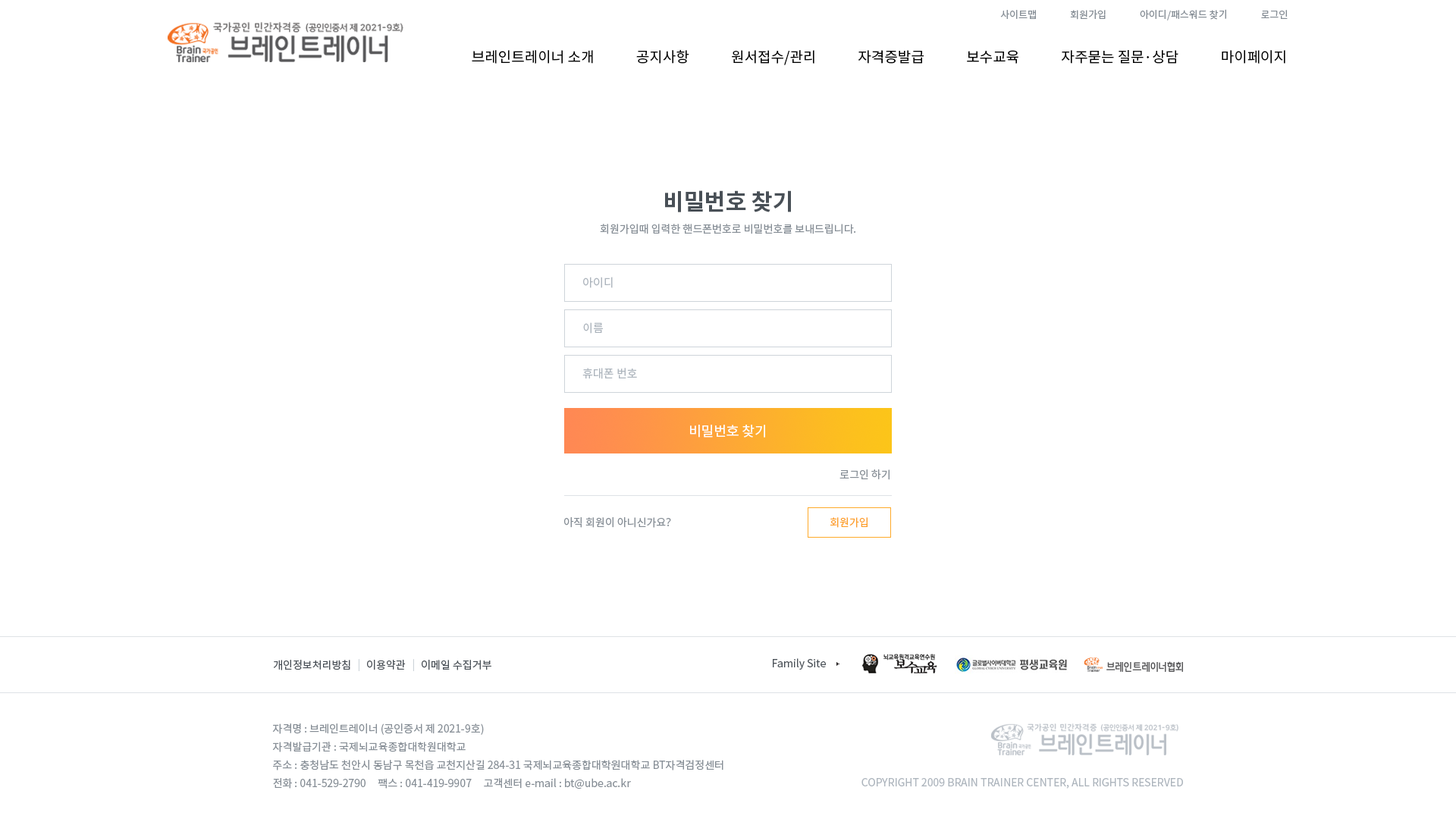
<style>
.page{position:relative;width:1456px;height:819px;background:#ffffff}
.page>*{position:absolute;margin:0}
.t1{font:9.9px "NotoSansCJKkr-Regular";letter-spacing:0.001em;color:#868e96}
.t2{font:14.4px "NotoSansCJKkr-Regular";color:#000000}
.t3{font:22.7px "NotoSansCJKkr-Bold";color:#495057}
.t4{font:10.6px "NotoSansCJKkr-Regular";color:#868e96;text-transform:uppercase}
.t5{font:11.4px "NotoSansCJKkr-Regular";color:#adb5bd}
.t6{font:13.6px "NotoSansCJKkr-Regular";color:#ffffff}
.t7{font:10.6px "NotoSansCJKkr-Regular";color:#868e96}
.t8{font:10.6px "NotoSansCJKkr-Regular";color:#fd9f27}
.t9{font:10.6px "NotoSansCJKkr-Regular";color:#495057}
.t10{font:10.6px "NotoSansCJKkr-Regular";color:#ced4da}
.t11{font:10.6px/18.2px "NotoSansCJKkr-Regular";color:#868e96}
.t12{font:10.6px "NotoSansCJKkr-Regular";color:#adb5bd}
</style>
<div class="page">
<p class="t1" style="left:1000px;top:9px;width:288px;height:11px">사이트맵               회원가입               아이디/패스워드 찾기               로그인</p>
<p class="t2" style="left:472px;top:49px;width:813px;height:16px">브레인트레이너 소개             공지사항             원서접수/관리             자격증발급             보수교육             자주묻는 질문·상담             마이페이지</p>
<p class="t3" style="left:665px;top:190px;width:126px;height:22px">비밀번호 찾기</p>
<p class="t4" style="left:600px;top:224px;width:256px;height:10px">회원가입때 입력한 핸드폰번호로 비밀번호를 보내드립니다.</p>
<p class="t5" style="left:583px;top:277px;width:30px;height:11px">아이디</p>
<p class="t5" style="left:583px;top:322px;width:20px;height:12px">이름</p>
<p class="t5" style="left:582px;top:368px;width:55px;height:11px">휴대폰 번호</p>
<p class="t6" style="left:690px;top:425px;width:75px;height:13px">비밀번호 찾기</p>
<p class="t7" style="left:839px;top:469px;width:51px;height:11px">로그인 하기</p>
<p class="t7" style="left:564px;top:517px;width:107px;height:11px">아직 회원이 아니신가요?</p>
<p class="t8" style="left:830px;top:517px;width:38px;height:11px">회원가입</p>
<p class="t9" style="left:273px;top:660px;width:77px;height:10px">개인정보처리방침</p>
<p class="t10" style="left:358px;top:659px;width:1px;height:12px">|</p>
<p class="t9" style="left:367px;top:660px;width:39px;height:10px">이용약관</p>
<p class="t10" style="left:413px;top:659px;width:1px;height:12px">|</p>
<p class="t9" style="left:422px;top:660px;width:69px;height:10px">이메일 수집거부</p>
<p class="t9" style="left:773px;top:658px;width:53px;height:12px">Family Site</p>
<p class="t11" style="left:272px;top:723px;width:451px;height:66px">자격명 : 브레인트레이너 (공인증서 제 2021-9호)<br>자격발급기관 : 국제뇌교육종합대학원대학교<br>주소 : 충청남도 천안시 동남구 목천읍 교천지산길 284-31 국제뇌교육종합대학원대학교 BT자격검정센터<br>전화 : 041-529-2790     팩스 : 041-419-9907     고객센터 e-mail : bt@ube.ac.kr</p>
<p class="t12" style="left:861px;top:778px;width:322px;height:11px">COPYRIGHT 2009 BRAIN TRAINER CENTER, ALL RIGHTS RESERVED</p>
</div>
